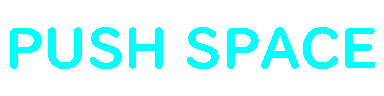
<style>
.page{position:relative;width:384px;height:96px;background:#ffffff}
.page>*{position:absolute;margin:0}
.t1{font:54.8px "UDDigiKyokashoNK-B";color:#00ffff}
</style>
<div class="page">
<p class="t1" style="left:10px;top:27px;width:365px;height:42px">PUSH SPACE</p>
</div>
